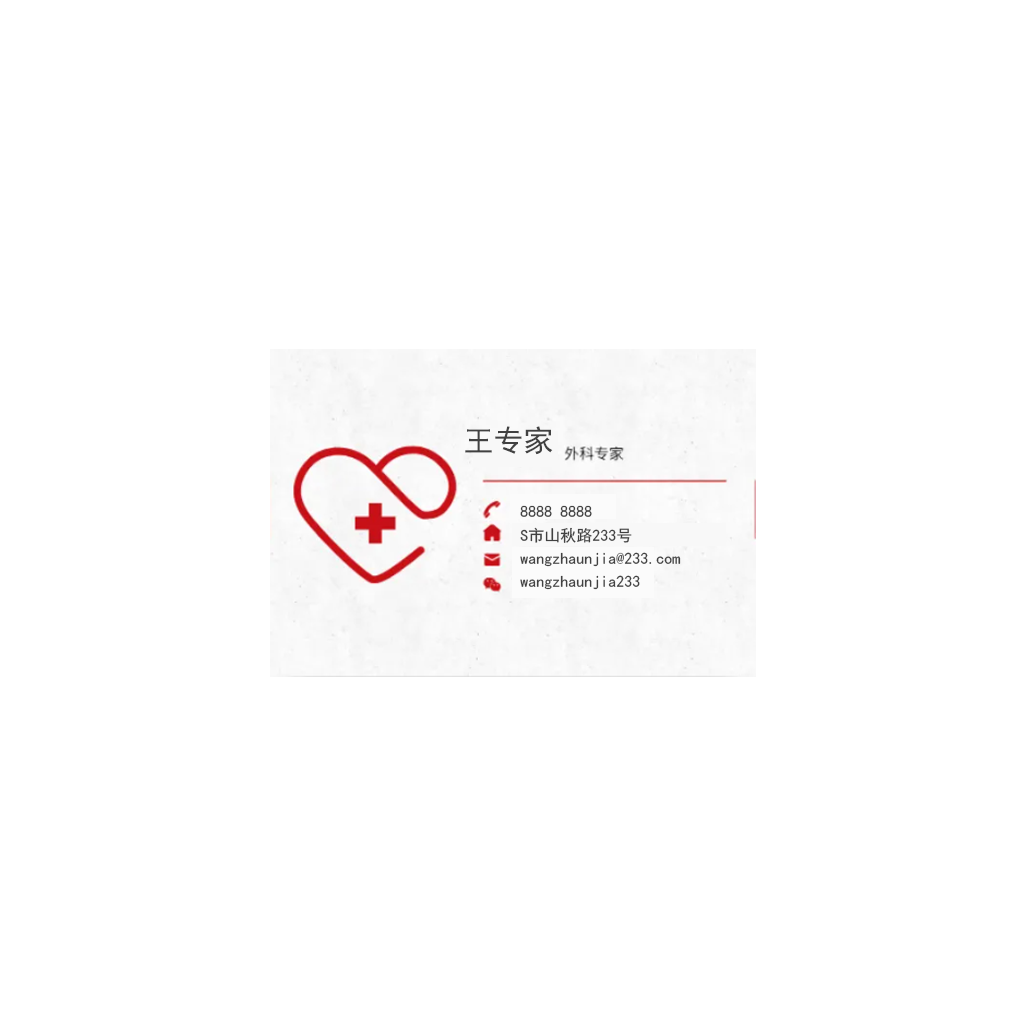
<style>
.page{position:relative;width:1024px;height:1024px;background:#ffffff}
.page>*{position:absolute;margin:0}
.t1{font:30px "SimHei";color:#414141}
.t2{font:16px "SimHei";color:#414141}
</style>
<div class="page">
<p class="t1" style="left:465px;top:426px;width:88px;height:29px">王专家</p>
<p class="t2" style="left:520px;top:505px;width:72px;height:12px">8888 8888</p>
<p class="t2" style="left:520px;top:527px;width:112px;height:16px">S市山秋路233号</p>
<p class="t2" style="left:520px;top:552px;width:161px;height:15px">wangzhaunjia@233.com</p>
<p class="t2" style="left:520px;top:575px;width:120px;height:15px">wangzhaunjia233</p>
</div>
